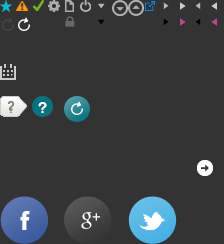
<style>
.page{position:relative;width:224px;height:244px;background:#333333}
.page>*{position:absolute;margin:0}
.t1{font:16px "ArialRoundedMTBold";color:#ffffff}
.t2{font:14.8px "ArialMT";color:#ffffff}
</style>
<div class="page">
<p class="t1" style="left:38px;top:102px;width:9px;height:11px">?</p>
<p class="t2" style="left:92px;top:213px;width:8px;height:8px">+</p>
</div>
